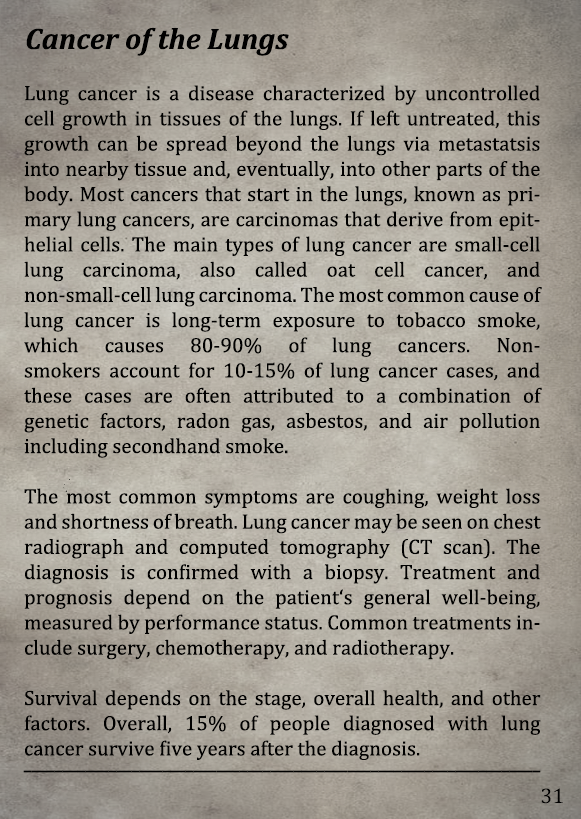
<style>
.page{position:relative;width:581px;height:819px}
.page>*{position:absolute;margin:0}
.t1{font:30px "Cambria-BoldItalic";color:#000000}
.t2{font:21px "Cambria";color:#000000}
.t3{font:21px "Arimo";color:#000000;scale:0.66 1}
.t4{font:21.5px "Cambria";color:#000000}
</style>
<div class="page">
<p class="t1" style="left:26px;top:27px;width:263px;height:29px">Cancer of the Lungs</p>
<p class="t2" style="left:24px;top:85px;width:518px;height:675px;text-align:justify">Lung cancer is a disease characterized by uncontrolled cell growth in tissues of the lungs. If left untreated, this growth can be spread beyond the lungs via metastatsis into nearby tissue and, eventually, into other parts of the body. Most cancers that start in the lungs, known as primary lung cancers, are carcinomas that derive from epithelial cells. The main types of lung cancer are small-cell lung carcinoma, also called oat cell cancer, and non-small-cell lung carcinoma. The most common cause of lung cancer is long-term exposure to tobacco smoke, which causes 80-90% of lung cancers. Non-<br>smokers account for 10-15% of lung cancer cases, and these cases are often attributed to a combination of           genetic factors, radon gas, asbestos, and air pollution        including secondhand smoke.<br><br>The most common symptoms are coughing, weight loss and shortness of breath. Lung cancer may be seen on chest radiograph and computed tomography (CT scan). The      diagnosis is confirmed with a biopsy. Treatment and      prognosis depend on the patient‘s general well-being, measured by performance status. Common treatments include surgery, chemotherapy, and radiotherapy.<br><br>Survival depends on the stage, overall health, and other factors. Overall, 15% of people diagnosed with lung cancer survive five years after the diagnosis.</p>
<p class="t3" style="left:23px;top:770px;width:518px;height:3px">___________________________________________________________________</p>
<p class="t4" style="left:541px;top:788px;width:22px;height:16px">31</p>
</div>
